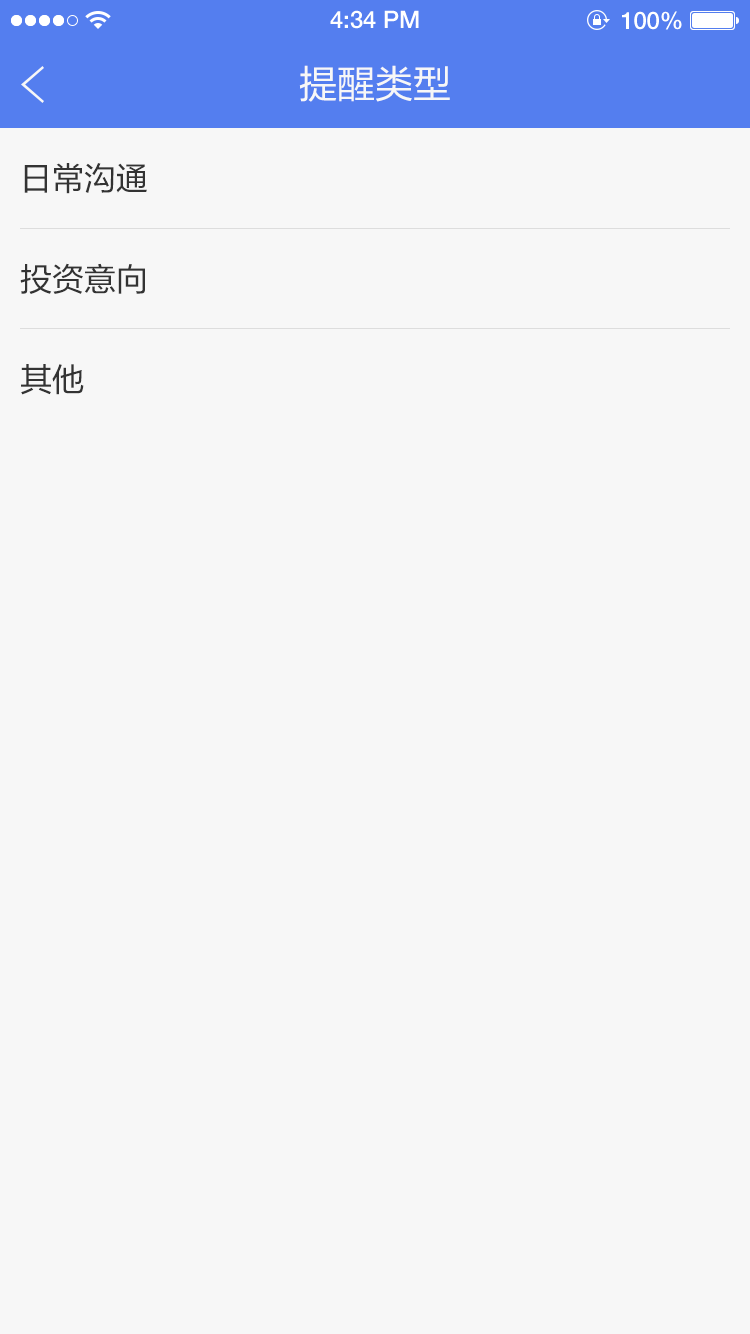
<style>
.page{position:relative;width:750px;height:1334px;background:#f7f7f7}
.page>*{position:absolute;margin:0}
.t1{font:24px "HelveticaNeueLTPro-Md";color:#ffffff}
.t2{font:38px "FZLTHJW-GB1-0";color:#f7f7f7}
.t3{font:32px "FZLTHJW-GB1-0";color:#333333}
</style>
<div class="page">
<p class="t1" style="left:330px;top:10px;width:89px;height:19px">4:34 PM</p>
<p class="t1" style="left:622px;top:11px;width:60px;height:19px">100%</p>
<p class="t2" style="left:299px;top:65px;width:151px;height:37px">提醒类型</p>
<p class="t3" style="left:24px;top:163px;width:123px;height:31px">日常沟通</p>
<p class="t3" style="left:20px;top:263px;width:125px;height:31px">投资意向</p>
<p class="t3" style="left:21px;top:364px;width:63px;height:31px">其他</p>
</div>
